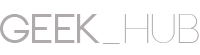
<style>
.page{position:relative;width:200px;height:55px;background:#ffffff}
.page>*{position:absolute;margin:0}
.t1{font:41px "Neou-Bold";color:#b0abab}
.t2{font:41px "Neou-Thin";color:#b0abab}
</style>
<div class="page">
<p class="t1" style="left:0px;top:14px;width:199px;height:30px">Geek<span class="t2">_Hub</span></p>
</div>
